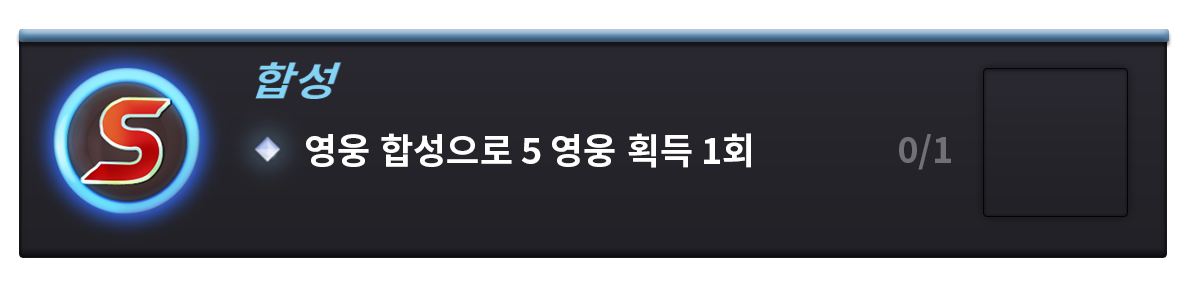
<style>
.page{position:relative;width:1200px;height:300px;background:#ffffff}
.page>*{position:absolute;margin:0}
.t1{font:36px "NotoSansCJKkr-Bold";color:#ffffff}
.t2{font:36px "NotoSansCJKkr-Bold";color:#717077}
</style>
<div class="page">
<p class="t1" style="left:306px;top:133px;width:445px;height:35px">영웅 합성으로 5 영웅 획득 1회</p>
<p class="t2" style="left:899px;top:134px;width:52px;height:36px">0/1</p>
</div>
